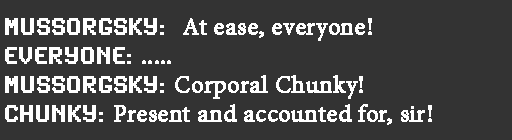
<style>
.page{position:relative;width:512px;height:140px;background:#333333}
.page>*{position:absolute;margin:0}
.t1{font:24px "MinionPro-Regular";color:#ffffff;font-weight:bold}
.t2{font:24px "SynchroLET";color:#ffffff;font-weight:bold}
</style>
<div class="page">
<p class="t1" style="left:5px;top:18px;width:427px;height:107px"><span class="t2">MUSSORGSKY:  </span>At ease, everyone!<br><span class="t2">EVERYONE: </span>.....<br><span class="t2">MUSSORGSKY: </span>Corporal Chunky!<br><span class="t2">CHUNKY: </span>Present and accounted for, sir!</p>
</div>
